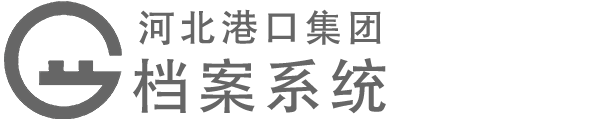
<style>
.page{position:relative;width:600px;height:120px;background:#ffffff}
.page>*{position:absolute;margin:0}
.t1{font:38px "AdobeHeitiStd-Regular";letter-spacing:0.1em;color:#666666}
.t2{font:60px "AdobeHeitiStd-Regular";letter-spacing:0.1em;color:#666666}
</style>
<div class="page">
<p class="t1" style="left:139px;top:9px;width:242px;height:36px">河北港口集团</p>
<p class="t2" style="left:133px;top:58px;width:253px;height:56px">档案系统</p>
</div>
